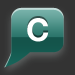
<style>
.page{position:relative;width:75px;height:75px;background:#333333}
.page>*{position:absolute;margin:0}
.t1{font:31.3px "HelveticaNeue-Bold";color:#ffffff}
</style>
<div class="page">
<p class="t1" style="left:27px;top:18px;width:22px;height:24px">C</p>
</div>
